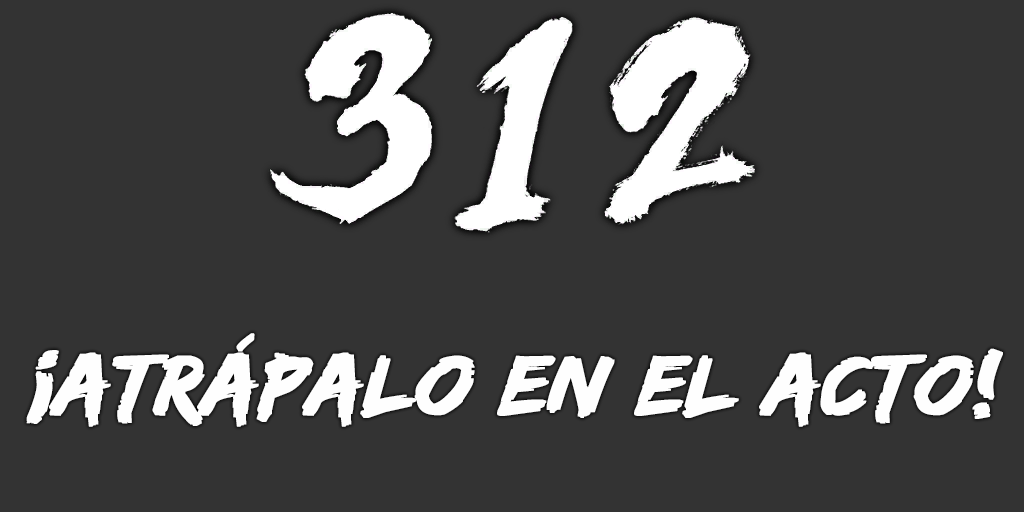
<style>
.page{position:relative;width:1024px;height:512px;background:#333333}
.page>*{position:absolute;margin:0}
.t1{font:88px "EdoSZ";color:#fefefe;font-weight:bold;font-style:italic;scale:1.04 1}
</style>
<div class="page">
<p class="t1" style="left:26px;top:333px;width:977px;height:94px">¡atrápalo en el acto!</p>
</div>
